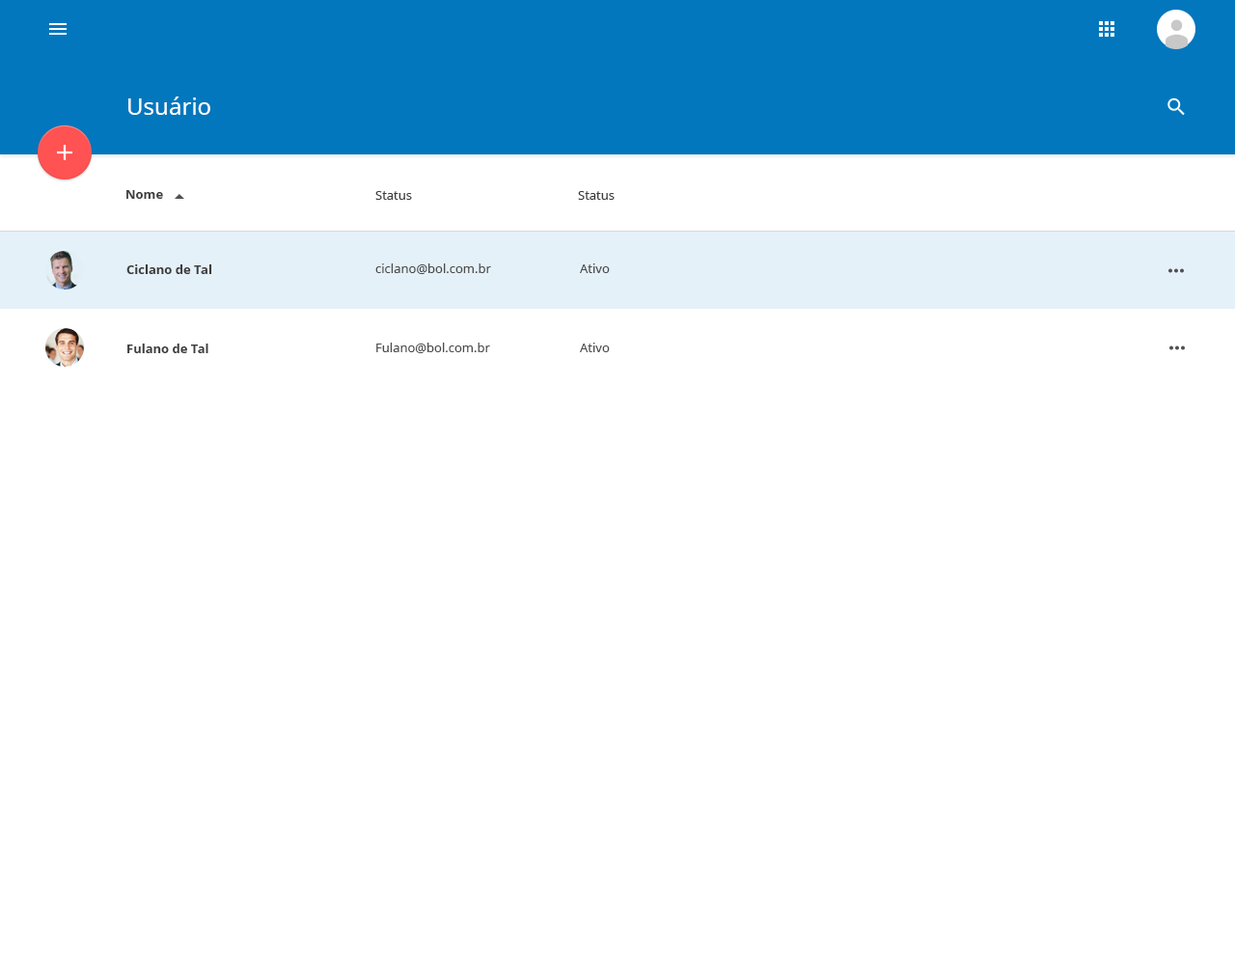
<style>
.page{position:relative;width:1235px;height:965px;background:#ffffff}
.page>*{position:absolute;margin:0}
.t1{font:23.2px "NotoSans";color:#ffffff}
.t2{font:12.5px "NotoSans-Bold";color:#3d3d3d}
.t3{font:12.5px "NotoSans";color:#3d3d3d}
.t4{font:12.5px "NotoSans";color:#4c4c4c}
</style>
<div class="page">
<p class="t1" style="left:128px;top:97px;width:82px;height:18px">Usuário</p>
<p class="t2" style="left:126px;top:190px;width:37px;height:9px">Nome</p>
<p class="t3" style="left:375px;top:191px;width:37px;height:9px">Status</p>
<p class="t3" style="left:578px;top:191px;width:37px;height:9px">Status</p>
<p class="t2" style="left:126px;top:264px;width:86px;height:10px">Ciclano de Tal</p>
<p class="t4" style="left:375px;top:263px;width:116px;height:11px">ciclano@bol.com.br</p>
<p class="t4" style="left:580px;top:263px;width:30px;height:10px">Ativo</p>
<p class="t2" style="left:127px;top:344px;width:81px;height:9px">Fulano de Tal</p>
<p class="t4" style="left:376px;top:343px;width:114px;height:10px">Fulano@bol.com.br</p>
<p class="t4" style="left:580px;top:343px;width:30px;height:9px">Ativo</p>
</div>
